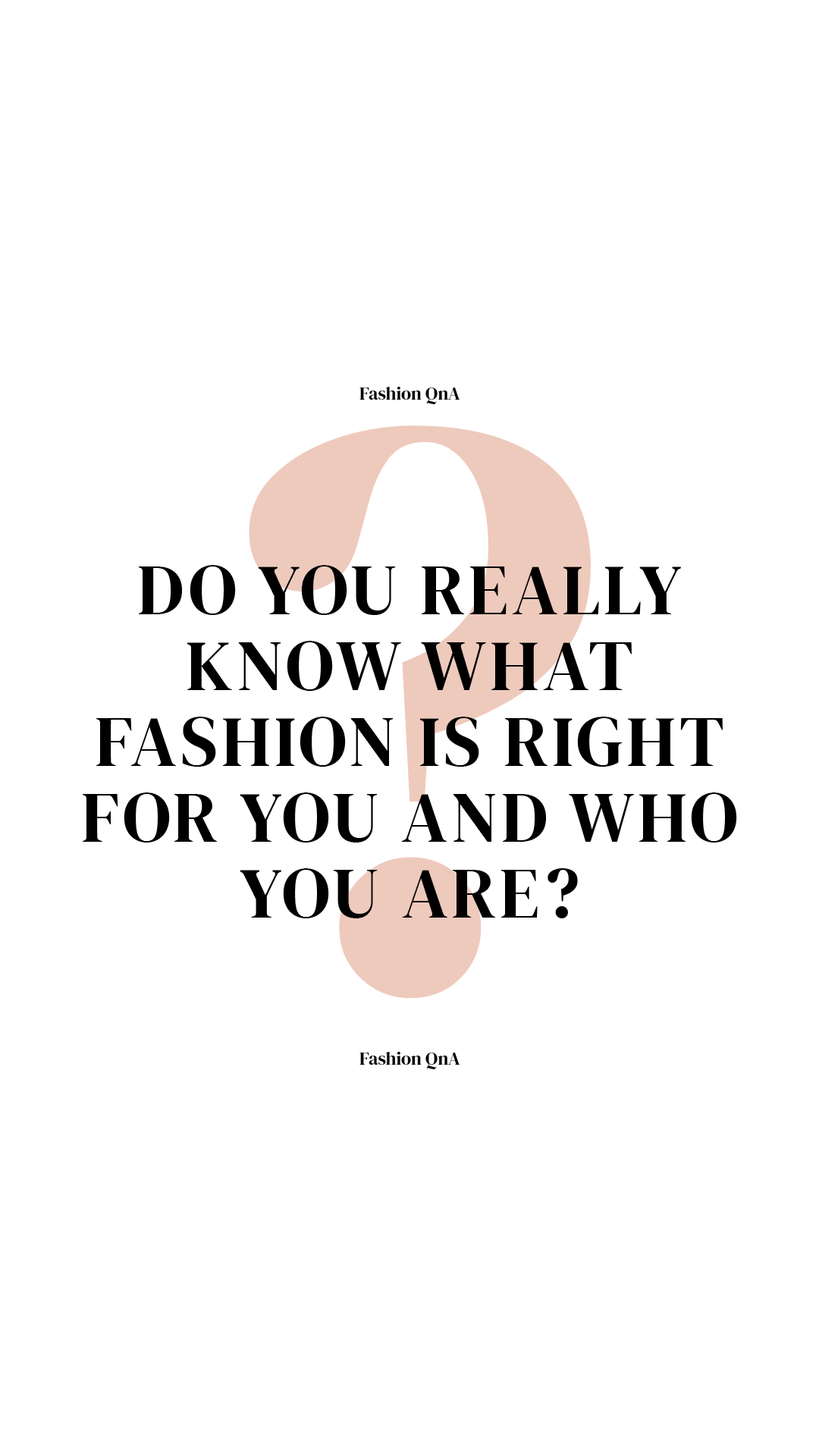
<style>
.page{position:relative;width:819px;height:1456px;background:#ffffff}
.page>*{position:absolute;margin:0}
.t1{font:18.2px "DMSerifDisplay-Regular";color:#000000}
.t2{font:71.3px/75.8px "DMSerifDisplay-Regular";letter-spacing:0.053em;color:#000000;text-transform:uppercase}
</style>
<div class="page">
<p class="t1" style="left:359px;top:387px;width:101px;height:17px">Fashion QnA</p>
<p class="t2" style="left:83px;top:565px;width:654px;height:353px;text-align:center">Do you really know what fashion is right for you and who you are?</p>
<p class="t1" style="left:359px;top:1052px;width:101px;height:17px">Fashion QnA</p>
</div>
